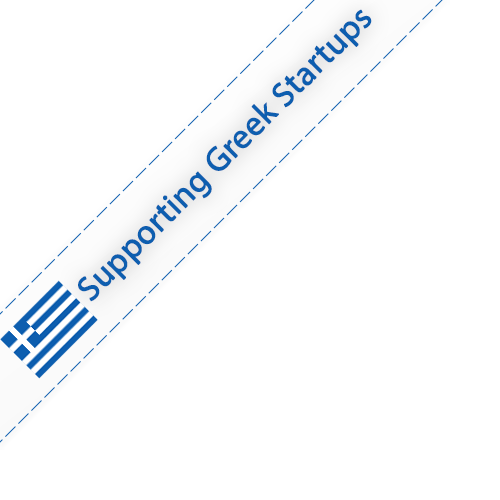
<style>
.page{position:relative;width:500px;height:500px;background:#ffffff}
.page>*{position:absolute;margin:0}
.t1{font:34px "MyriadPro-Regular";color:#0d5eaf;font-weight:bold}
</style>
<div class="page">
<p class="t1" style="left:78px;top:9px;width:294px;height:293px;rotate:-45deg">Supporting Greek Startups</p>
</div>
